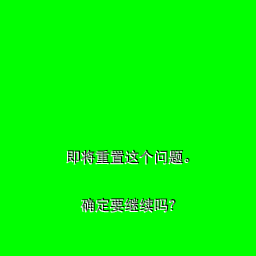
<style>
.page{position:relative;width:256px;height:256px;background:#00ff00}
.page>*{position:absolute;margin:0}
.t1{font:14.7px/24px "DFPHeiW5-GB"}
</style>
<div class="page">
<p class="t1" style="left:67px;top:149px;width:123px;height:63px;text-align:center">即将重置这个问题。<br><br>确定要继续吗？</p>
</div>
